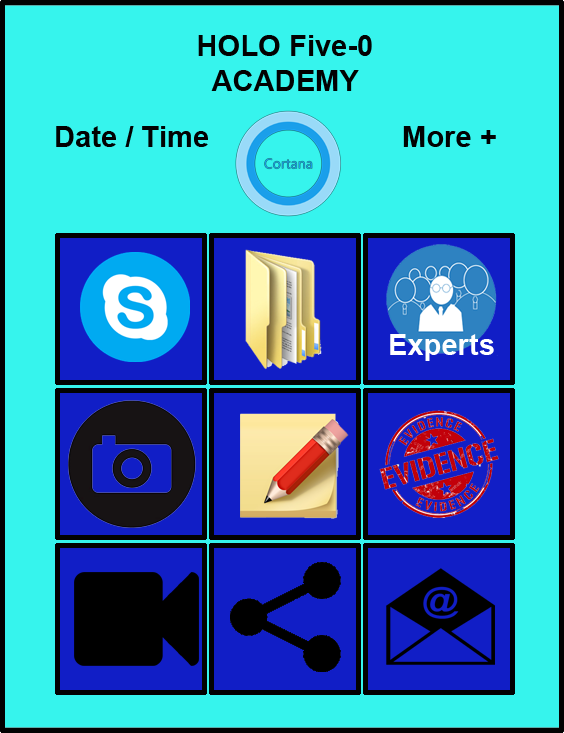
<style>
.page{position:relative;width:564px;height:733px;background:#36f4ed}
.page>*{position:absolute;margin:0}
.t1{font:29.2px "Arial-BoldMT";color:#020202}
</style>
<div class="page">
<p class="t1" style="left:198px;top:35px;width:174px;height:56px;text-align:center">HOLO Five-0<br>ACADEMY</p>
<p class="t1" style="left:56px;top:126px;width:152px;height:21px">Date / Time</p>
<p class="t1" style="left:403px;top:126px;width:93px;height:21px">More +</p>
</div>
